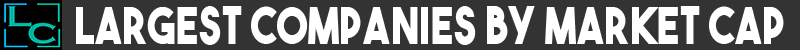
<style>
.page{position:relative;width:800px;height:50px;background:#333333}
.page>*{position:absolute;margin:0}
.t1{font:51.1px "TheBoldFont";letter-spacing:0.02em;color:#ffffff;scale:0.8 1}
</style>
<div class="page">
<p class="t1" style="left:76px;top:6px;width:708px;height:39px">Largest Companies By Market Cap</p>
</div>
